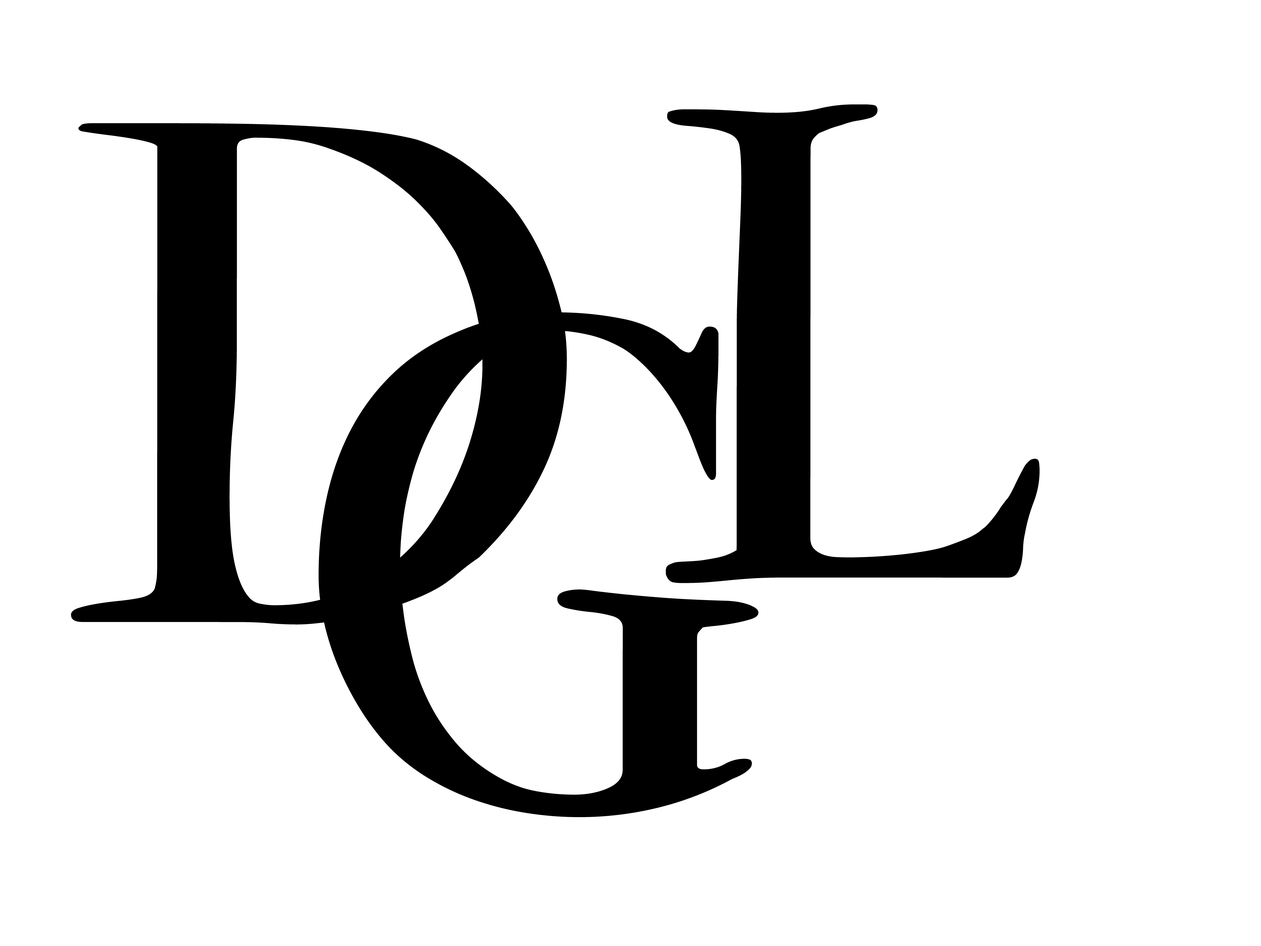
<style>
.page{position:relative;width:1261px;height:946px;background:#ffffff}
.page>*{position:absolute;margin:0}
.t1{font:557.7px "IM_FELL_French_Canon_Roman";color:#000000}
.t2{font:597.8px "IM_FELL_French_Canon_Roman";color:#000000}
.t3{font:589.4px "IM_FELL_French_Canon_Roman";color:#000000}
</style>
<div class="page">
<p class="t1" style="left:665px;top:104px;width:375px;height:479px">L</p>
<p class="t2" style="left:71px;top:123px;width:496px;height:502px">D</p>
<p class="t3" style="left:318px;top:312px;width:440px;height:505px">G</p>
</div>
